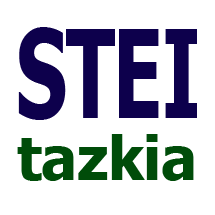
<style>
.page{position:relative;width:215px;height:215px;background:#ffffff}
.page>*{position:absolute;margin:0}
.t1{font:122.1px "Tahoma-Bold";letter-spacing:-0.01em;color:#0d004c;scale:0.65 1}
.t2{font:60px "Tahoma-Bold";letter-spacing:-0.01em;color:#004c09}
</style>
<div class="page">
<p class="t1" style="left:18px;top:27px;width:179px;height:93px">STEI</p>
<p class="t2" style="left:17px;top:134px;width:177px;height:47px">tazkia</p>
</div>
